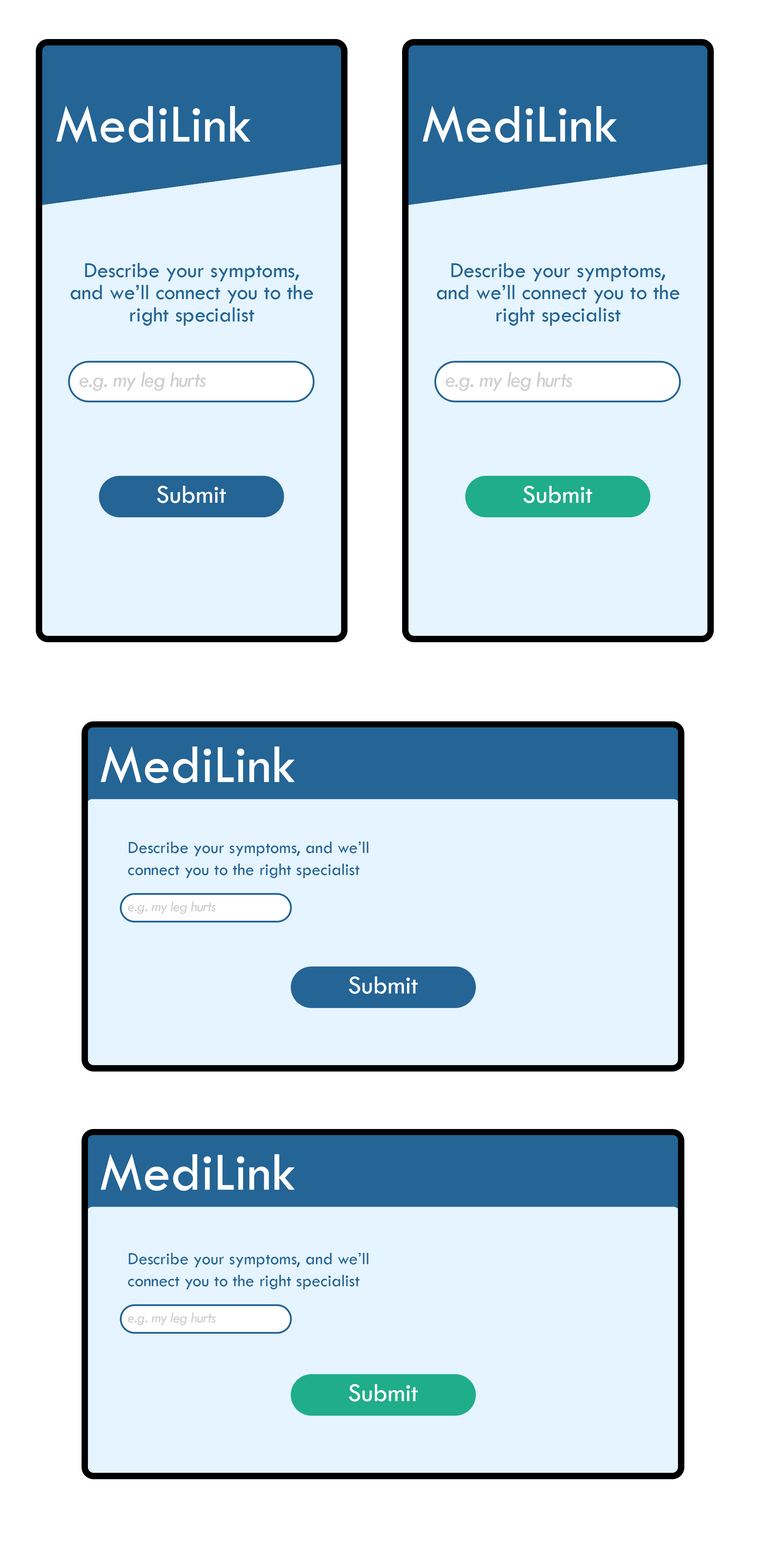
<style>
.page{position:relative;width:773px;height:1542px;background:#e5f4ff}
.page>*{position:absolute;margin:0}
.t1{font:55.7px "TwCenMT-Regular";color:#ffffff}
.t2{font:22.2px/22.2px "TwCenMT-Regular";color:#246596}
.t3{font:22.2px "TwCenMT-Italic";letter-spacing:-0.04em;color:#cecece}
.t4{font:26.6px "TwCenMT-Regular";color:#ffffff}
.t5{font:17.7px/22.2px "TwCenMT-Regular";color:#246596}
.t6{font:15.4px "TwCenMT-Italic";letter-spacing:-0.04em;color:#cecece}
</style>
<div class="page">
<p class="t1" style="left:56px;top:106px;width:195px;height:37px">MediLink</p>
<p class="t1" style="left:423px;top:106px;width:194px;height:37px">MediLink</p>
<p class="t2" style="left:71px;top:263px;width:242px;height:63px;text-align:center">Describe your symptoms, and we’ll connect you to the right specialist</p>
<p class="t2" style="left:437px;top:263px;width:243px;height:63px;text-align:center">Describe your symptoms, and we’ll connect you to the right specialist</p>
<p class="t3" style="left:79px;top:372px;width:127px;height:19px">e.g. my leg hurts</p>
<p class="t3" style="left:446px;top:372px;width:127px;height:19px">e.g. my leg hurts</p>
<p class="t4" style="left:157px;top:486px;width:69px;height:17px">Submit</p>
<p class="t4" style="left:523px;top:486px;width:69px;height:17px">Submit</p>
<p class="t1" style="left:101px;top:746px;width:194px;height:37px">MediLink</p>
<p class="t5" style="left:128px;top:842px;width:241px;height:36px">Describe your symptoms, and we’ll connect you to the right specialist</p>
<p class="t6" style="left:128px;top:901px;width:88px;height:13px">e.g. my leg hurts</p>
<p class="t4" style="left:349px;top:976px;width:69px;height:18px">Submit</p>
<p class="t1" style="left:101px;top:1154px;width:194px;height:37px">MediLink</p>
<p class="t5" style="left:128px;top:1253px;width:241px;height:36px">Describe your symptoms, and we’ll connect you to the right specialist</p>
<p class="t6" style="left:128px;top:1312px;width:88px;height:13px">e.g. my leg hurts</p>
<p class="t4" style="left:349px;top:1384px;width:69px;height:17px">Submit</p>
</div>
